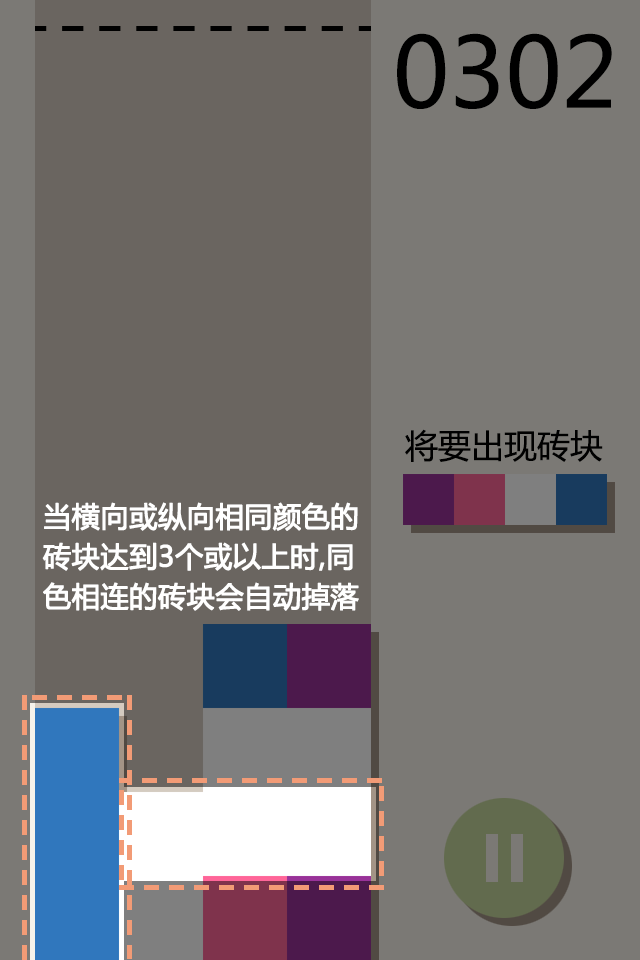
<style>
.page{position:relative;width:640px;height:960px;background:#7b7975}
.page>*{position:absolute;margin:0}
.t1{font:96px "MicrosoftYaHei";color:#000000}
.t2{font:33px "MicrosoftYaHei";color:#000000}
.t3{font:28px/40px "MicrosoftYaHei";color:#ffffff;font-weight:bold}
</style>
<div class="page">
<p class="t1" style="left:397px;top:33px;width:215px;height:76px">0302</p>
<p class="t2" style="left:405px;top:429px;width:198px;height:33px">将要出现砖块</p>
<p class="t3" style="left:42px;top:502px;width:317px;height:109px">当横向或纵向相同颜色的砖块达到3个或以上时,同色相连的砖块会自动掉落</p>
</div>
